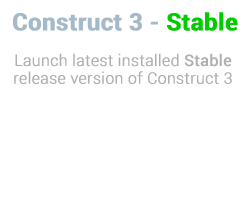
<style>
.page{position:relative;width:250px;height:200px;background:#ffffff}
.page>*{position:absolute;margin:0}
.t1{font:23.7px "Roboto-Bold";color:#a5bac8;font-weight:bold}
.t2{font:23.7px "Roboto-Bold";color:#00cc00;font-weight:bold}
.t3{font:15.8px/17.7px "Roboto-Light";color:#afafaf;font-weight:bold}
.t4{font:15.8px/17.7px "Roboto-Regular";color:#afafaf;font-weight:bold}
</style>
<div class="page">
<p class="t1" style="left:13px;top:12px;width:225px;height:19px">Construct 3 - <span class="t2">Stable</span></p>
<p class="t3" style="left:14px;top:53px;width:218px;height:31px;text-align:center">Launch latest installed <span class="t4">Stable <br></span>release version of Construct 3</p>
</div>
